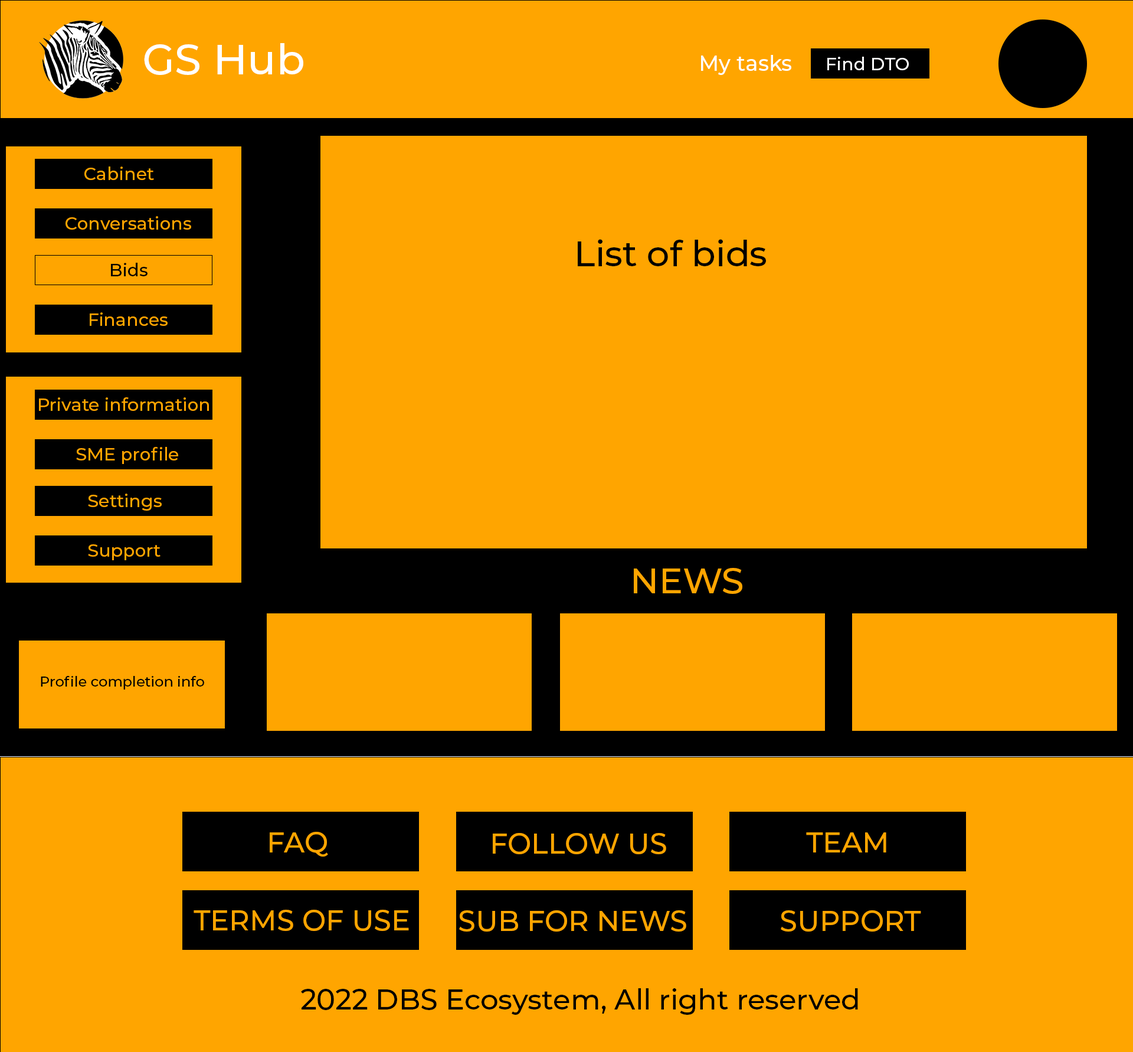
<style>
.page{position:relative;width:1133px;height:1052px;background:#ffa500}
.page>*{position:absolute;margin:0}
.t1{font:42.5px "Montserrat-Medium";color:#ffffff}
.t2{font:21.3px "Montserrat-Medium";color:#ffffff}
.t3{font:17.7px "Montserrat-Medium";color:#ffffff}
.t4{font:17.7px "Montserrat-Medium";color:#ffa500}
.t5{font:35.4px "Montserrat-Medium";color:#000000}
.t6{font:17.7px "Montserrat-Medium";color:#000000}
.t7{font:35.4px "Montserrat-Medium";color:#ffa500}
.t8{font:14.2px "Montserrat-Medium";color:#000000}
.t9{font:28.3px "Montserrat-Medium";color:#ffa500}
.t10{font:28.3px "Montserrat-Medium";color:#000000}
</style>
<div class="page">
<p class="t1" style="left:144px;top:43px;width:159px;height:32px">GS Hub</p>
<p class="t2" style="left:701px;top:55px;width:91px;height:20px">My tasks</p>
<p class="t3" style="left:828px;top:57px;width:81px;height:13px">Find DTO</p>
<p class="t4" style="left:84px;top:166px;width:70px;height:14px">Cabinet</p>
<p class="t4" style="left:66px;top:216px;width:125px;height:14px">Conversations</p>
<p class="t5" style="left:578px;top:239px;width:188px;height:27px">List of bids</p>
<p class="t6" style="left:111px;top:263px;width:37px;height:13px">Bids</p>
<p class="t4" style="left:90px;top:312px;width:78px;height:14px">Finances</p>
<p class="t4" style="left:39px;top:397px;width:170px;height:14px">Private information</p>
<p class="t4" style="left:76px;top:447px;width:102px;height:17px">SME profile</p>
<p class="t4" style="left:88px;top:494px;width:74px;height:17px">Settings</p>
<p class="t4" style="left:88px;top:544px;width:73px;height:16px">Support</p>
<p class="t7" style="left:634px;top:568px;width:109px;height:26px">NEWS</p>
<p class="t8" style="left:41px;top:676px;width:163px;height:14px">Profile completion info</p>
<p class="t9" style="left:270px;top:832px;width:58px;height:25px">FAQ</p>
<p class="t9" style="left:493px;top:833px;width:174px;height:21px">FOLLOW US</p>
<p class="t9" style="left:806px;top:832px;width:81px;height:20px">TEAM</p>
<p class="t9" style="left:194px;top:910px;width:215px;height:21px">TERMS OF USE</p>
<p class="t9" style="left:459px;top:910px;width:228px;height:22px">SUB FOR NEWS</p>
<p class="t9" style="left:781px;top:910px;width:141px;height:22px">SUPPORT</p>
<p class="t10" style="left:301px;top:988px;width:557px;height:27px">2022 DBS Ecosystem, All right reserved</p>
</div>
